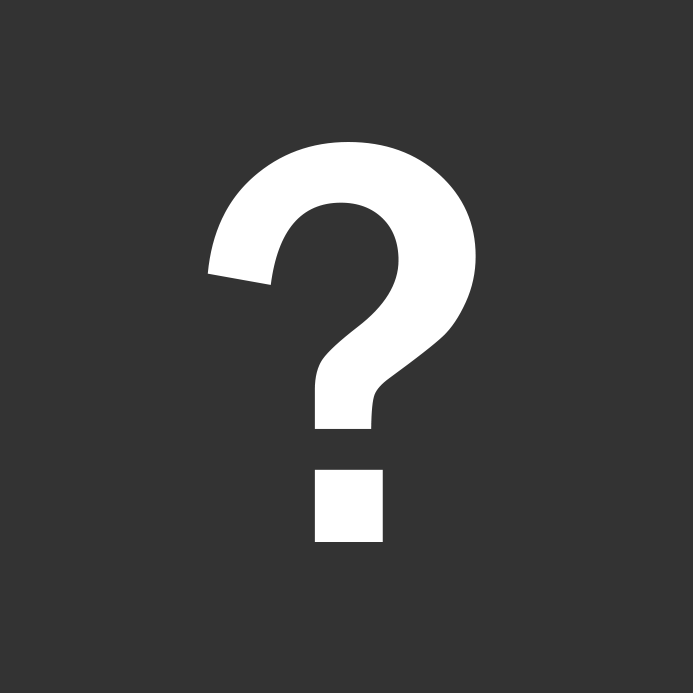
<style>
.page{position:relative;width:693px;height:693px;background:#333333}
.page>*{position:absolute;margin:0}
.t1{font:591px "FranklinGothic-Medium";color:#ffffff}
</style>
<div class="page">
<p class="t1" style="left:207px;top:142px;width:269px;height:400px">?</p>
</div>
